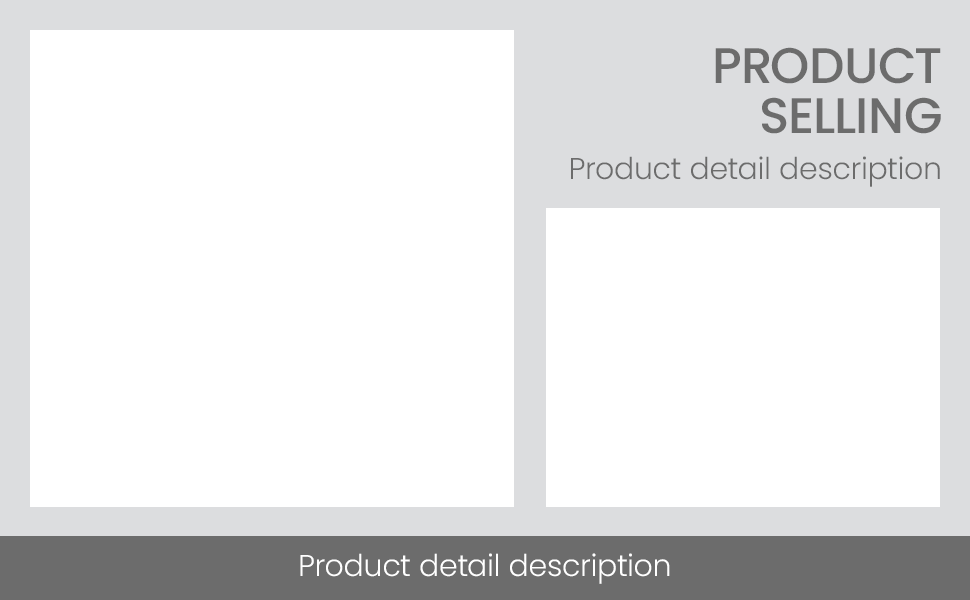
<style>
.page{position:relative;width:970px;height:600px;background:#ffffff}
.page>*{position:absolute;margin:0}
.t1{font:50px/50px "Poppins-Medium";color:#6c6c6c;text-transform:uppercase}
.t2{font:30px "Poppins-Light";color:#6c6c6c}
.t3{font:30px "Poppins-Light";color:#ffffff}
</style>
<div class="page">
<p class="t1" style="left:715px;top:47px;width:226px;height:87px;text-align:right">Product<br>selling</p>
<p class="t2" style="left:571px;top:156px;width:369px;height:31px">Product detail description</p>
<p class="t3" style="left:300px;top:553px;width:370px;height:31px">Product detail description</p>
</div>
